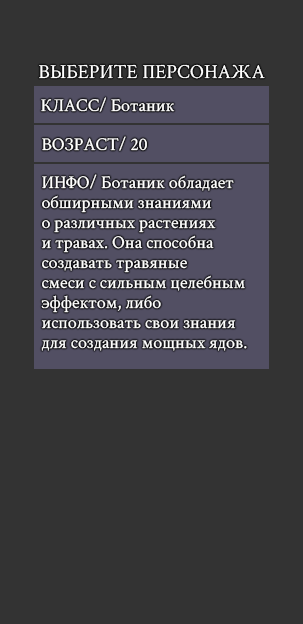
<style>
.page{position:relative;width:303px;height:624px;background:#333333}
.page>*{position:absolute;margin:0}
.t1{font:20px "CrimsonText-Regular";color:#ffffff}
.t2{font:18px "CrimsonText-Regular";color:#ffffff}
.t3{font:18px/20px "CrimsonText-Regular";color:#ffffff}
</style>
<div class="page">
<p class="t1" style="left:39px;top:64px;width:226px;height:15px">ВЫБЕРИТЕ ПЕРСОНАЖА</p>
<p class="t2" style="left:41px;top:97px;width:134px;height:15px">КЛАСС/ Ботаник</p>
<p class="t2" style="left:42px;top:136px;width:105px;height:15px">ВОЗРАСТ/ 20</p>
<p class="t3" style="left:41px;top:174px;width:206px;height:177px">ИНФО/ Ботаник обладает<br>обширными знаниями<br>о различных растениях<br>и травах. Она способна<br>создавать травяные<br>смеси с сильным целебным<br>эффектом, либо<br>использовать свои знания<br>для создания мощных ядов.</p>
</div>
